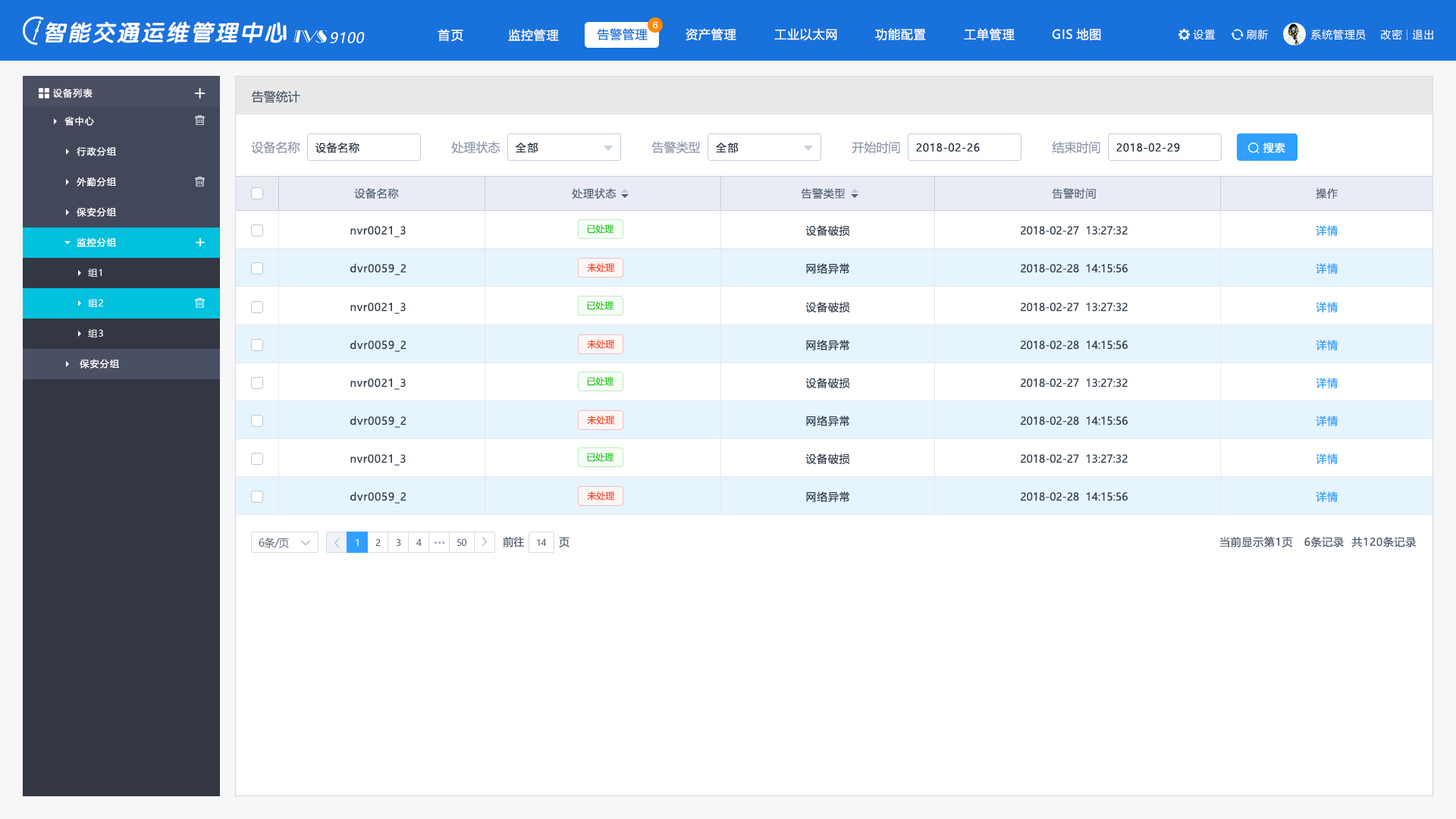
<style>
.page{position:relative;width:1456px;height:819px;background:#ffffff}
.page>*{position:absolute;margin:0}
.t1{font:22.7px "VeraSansYuanTiMono-BoldItalic";letter-spacing:0.08em;color:#ffffff}
.t2{font:12.1px "MicrosoftYaHei";letter-spacing:0.1em;color:#fefeff}
.t3{font:12.1px "MicrosoftYaHei";letter-spacing:0.05em;color:#fefeff}
.t4{font:12.1px "MicrosoftYaHei";letter-spacing:0.05em;color:#1971dc}
.t5{font:9.1px "PingFang-SC-Bold";color:#ffffff}
.t6{font:12.1px "MicrosoftYaHei";letter-spacing:0.05em;color:#ffffff}
.t7{font:10.6px "MicrosoftYaHei";letter-spacing:0.05em;color:#ffffff}
.t8{font:14.2px "MicrosoftYaHei";letter-spacing:0.03em;color:#ffffff;font-style:italic}
.t9{font:9.1px "MicrosoftYaHei";letter-spacing:0.1em;color:#ffffff}
.t10{font:12.1px "MicrosoftYaHei";color:#4c5a6d}
.t11{font:12.1px "MicrosoftYaHei";color:#8e9aad}
.t12{font:10.6px "MicrosoftYaHei";letter-spacing:0.05em;color:#1f2d3d}
.t13{font:10.6px "MicrosoftYaHei";letter-spacing:0.1em;color:#1f2d3d}
.t14{font:10.6px "MicrosoftYaHei";letter-spacing:0.05em;color:#fefeff}
.t15{font:10.6px "MicrosoftYaHei";letter-spacing:0.05em;color:#546477}
.t16{font:10.6px "MicrosoftYaHei";letter-spacing:0.05em;color:#2c3c4d}
.t17{font:9.1px "MicrosoftYaHei";color:#22c31e}
.t18{font:10.6px "MicrosoftYaHei";color:#2c3c4d}
.t19{font:10.6px "MicrosoftYaHei";letter-spacing:0.05em;color:#2fa0ff}
.t20{font:9.1px "MicrosoftYaHei";color:#ff4421}
.t21{font:10.6px "MicrosoftYaHei";letter-spacing:-0.05em;color:#4a586b}
.t22{font:9.1px "MicrosoftYaHei";letter-spacing:-0.05em}
.t23{font:9.1px "MicrosoftYaHei";letter-spacing:-0.05em;color:#4c5a6d}
.t24{font:10.6px "MicrosoftYaHei";color:#4a586b}
.t25{font:10.6px "MicrosoftYaHei";letter-spacing:0.05em;color:#4a586b}
</style>
<div class="page">
<p class="t1" style="left:45px;top:21px;width:242px;height:22px">智能交通运维管理中心</p>
<p class="t2" style="left:438px;top:29px;width:25px;height:13px">首页</p>
<p class="t3" style="left:508px;top:29px;width:51px;height:13px">监控管理</p>
<p class="t4" style="left:597px;top:28px;width:51px;height:13px">告警管理</p>
<p class="t5" style="left:653px;top:21px;width:5px;height:8px">6</p>
<p class="t6" style="left:686px;top:28px;width:50px;height:13px">资产管理</p>
<p class="t6" style="left:774px;top:28px;width:63px;height:13px">工业以太网</p>
<p class="t6" style="left:875px;top:28px;width:51px;height:13px">功能配置</p>
<p class="t6" style="left:964px;top:28px;width:51px;height:13px">工单管理</p>
<p class="t6" style="left:1053px;top:28px;width:48px;height:13px">GIS地图</p>
<p class="t7" style="left:1193px;top:30px;width:23px;height:10px">设置</p>
<p class="t7" style="left:1246px;top:29px;width:22px;height:11px">刷新</p>
<p class="t7" style="left:1310px;top:29px;width:56px;height:11px">系统管理员</p>
<p class="t7" style="left:1381px;top:29px;width:21px;height:11px">改密</p>
<p class="t7" style="left:1412px;top:30px;width:21px;height:10px">退出</p>
<p class="t8" style="left:330px;top:32px;width:35px;height:11px">9100</p>
<p class="t9" style="left:53px;top:88px;width:40px;height:10px">设备列表</p>
<p class="t10" style="left:252px;top:90px;width:48px;height:13px">告警统计</p>
<p class="t9" style="left:64px;top:116px;width:30px;height:10px">省中心</p>
<p class="t9" style="left:77px;top:146px;width:39px;height:10px">行政分组</p>
<p class="t11" style="left:251px;top:141px;width:49px;height:13px">设备名称</p>
<p class="t12" style="left:315px;top:142px;width:44px;height:11px">设备名称</p>
<p class="t11" style="left:451px;top:141px;width:49px;height:13px">处理状态</p>
<p class="t13" style="left:516px;top:143px;width:22px;height:10px">全部</p>
<p class="t11" style="left:651px;top:141px;width:50px;height:13px">告警类型</p>
<p class="t13" style="left:716px;top:143px;width:23px;height:10px">全部</p>
<p class="t11" style="left:852px;top:141px;width:48px;height:13px">开始时间</p>
<p class="t12" style="left:916px;top:143px;width:64px;height:9px">2018-02-26</p>
<p class="t11" style="left:1052px;top:141px;width:48px;height:13px">结束时间</p>
<p class="t12" style="left:1116px;top:143px;width:64px;height:9px">2018-02-29</p>
<p class="t14" style="left:1263px;top:143px;width:22px;height:10px">搜索</p>
<p class="t9" style="left:77px;top:177px;width:39px;height:10px">外勤分组</p>
<p class="t15" style="left:354px;top:188px;width:45px;height:11px">设备名称</p>
<p class="t15" style="left:572px;top:188px;width:45px;height:11px">处理状态</p>
<p class="t15" style="left:801px;top:188px;width:45px;height:11px">告警类型</p>
<p class="t15" style="left:1052px;top:188px;width:44px;height:11px">告警时间</p>
<p class="t15" style="left:1316px;top:188px;width:22px;height:11px">操作</p>
<p class="t9" style="left:77px;top:207px;width:39px;height:10px">保安分组</p>
<p class="t16" style="left:350px;top:226px;width:56px;height:11px">nvr0021_3</p>
<p class="t17" style="left:587px;top:224px;width:27px;height:10px">已处理</p>
<p class="t16" style="left:805px;top:225px;width:45px;height:11px">设备破损</p>
<p class="t18" style="left:1021px;top:226px;width:107px;height:9px">2018-02-27  13:27:32</p>
<p class="t19" style="left:1316px;top:225px;width:22px;height:11px">详情</p>
<p class="t9" style="left:77px;top:237px;width:39px;height:10px">监控分组</p>
<p class="t9" style="left:88px;top:268px;width:14px;height:9px">组1</p>
<p class="t16" style="left:350px;top:263px;width:56px;height:12px">dvr0059_2</p>
<p class="t20" style="left:587px;top:263px;width:28px;height:9px">未处理</p>
<p class="t16" style="left:806px;top:263px;width:43px;height:11px">网络异常</p>
<p class="t18" style="left:1021px;top:264px;width:107px;height:9px">2018-02-28  14:15:56</p>
<p class="t19" style="left:1316px;top:263px;width:22px;height:11px">详情</p>
<p class="t9" style="left:88px;top:299px;width:15px;height:8px">组2</p>
<p class="t16" style="left:350px;top:303px;width:56px;height:11px">nvr0021_3</p>
<p class="t17" style="left:587px;top:301px;width:27px;height:9px">已处理</p>
<p class="t16" style="left:805px;top:302px;width:45px;height:10px">设备破损</p>
<p class="t18" style="left:1021px;top:303px;width:107px;height:9px">2018-02-27  13:27:32</p>
<p class="t19" style="left:1316px;top:302px;width:22px;height:10px">详情</p>
<p class="t9" style="left:88px;top:329px;width:15px;height:8px">组3</p>
<p class="t16" style="left:350px;top:340px;width:56px;height:12px">dvr0059_2</p>
<p class="t20" style="left:587px;top:340px;width:28px;height:9px">未处理</p>
<p class="t16" style="left:806px;top:340px;width:43px;height:10px">网络异常</p>
<p class="t18" style="left:1021px;top:340px;width:107px;height:10px">2018-02-28  14:15:56</p>
<p class="t19" style="left:1316px;top:340px;width:22px;height:10px">详情</p>
<p class="t9" style="left:80px;top:359px;width:39px;height:10px">保安分组</p>
<p class="t17" style="left:587px;top:377px;width:27px;height:9px">已处理</p>
<p class="t16" style="left:805px;top:378px;width:45px;height:10px">设备破损</p>
<p class="t19" style="left:1316px;top:378px;width:22px;height:10px">详情</p>
<p class="t16" style="left:350px;top:378px;width:56px;height:12px">nvr0021_3</p>
<p class="t18" style="left:1021px;top:378px;width:107px;height:10px">2018-02-27  13:27:32</p>
<p class="t16" style="left:350px;top:416px;width:56px;height:12px">dvr0059_2</p>
<p class="t20" style="left:587px;top:416px;width:28px;height:9px">未处理</p>
<p class="t16" style="left:806px;top:416px;width:43px;height:10px">网络异常</p>
<p class="t18" style="left:1021px;top:416px;width:107px;height:9px">2018-02-28  14:15:56</p>
<p class="t19" style="left:1316px;top:416px;width:22px;height:10px">详情</p>
<p class="t16" style="left:350px;top:454px;width:56px;height:12px">nvr0021_3</p>
<p class="t17" style="left:587px;top:453px;width:27px;height:9px">已处理</p>
<p class="t16" style="left:805px;top:453px;width:45px;height:11px">设备破损</p>
<p class="t18" style="left:1021px;top:454px;width:107px;height:9px">2018-02-27  13:27:32</p>
<p class="t19" style="left:1316px;top:453px;width:22px;height:11px">详情</p>
<p class="t16" style="left:350px;top:491px;width:56px;height:13px">dvr0059_2</p>
<p class="t20" style="left:587px;top:491px;width:28px;height:9px">未处理</p>
<p class="t16" style="left:806px;top:491px;width:43px;height:11px">网络异常</p>
<p class="t18" style="left:1021px;top:492px;width:107px;height:9px">2018-02-28  14:15:56</p>
<p class="t19" style="left:1316px;top:491px;width:22px;height:11px">详情</p>
<p class="t21" style="left:259px;top:538px;width:30px;height:10px">6条/页</p>
<p class="t22" style="left:356px;top:538px;width:3px;height:8px">1</p>
<p class="t23" style="left:375px;top:538px;width:6px;height:8px">2</p>
<p class="t23" style="left:396px;top:538px;width:5px;height:8px">3</p>
<p class="t23" style="left:416px;top:538px;width:6px;height:8px">4</p>
<p class="t23" style="left:457px;top:538px;width:9px;height:8px">50</p>
<p class="t24" style="left:503px;top:536px;width:21px;height:12px">前往</p>
<p class="t23" style="left:537px;top:538px;width:10px;height:8px">14</p>
<p class="t24" style="left:559px;top:537px;width:11px;height:11px">页</p>
<p class="t25" style="left:1219px;top:536px;width:198px;height:12px">当前显示第1页   6条记录  共120条记录</p>
</div>
